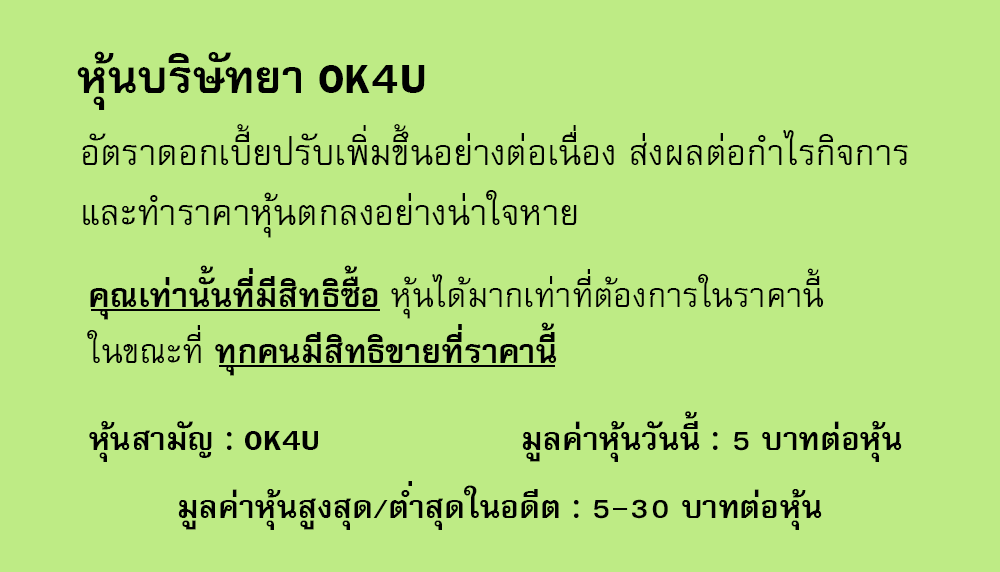
<style>
.page{position:relative;width:1000px;height:572px;background:#beeb85}
.page>*{position:absolute;margin:0}
.t1{font:64px "FreesiaUPCBold";color:#000000}
.t2{font:50px/60px "FreesiaUPC";color:#000000}
.t3{font:47px "FreesiaUPC";color:#000000}
.t4{font:47px "FreesiaUPCBold";color:#000000}
.t5{font:45px "FreesiaUPCBold";color:#000000}
</style>
<div class="page">
<p class="t1" style="left:77px;top:51px;width:348px;height:59px">หุ้นบริษัทยา OK4U</p>
<p class="t2" style="left:82px;top:124px;width:826px;height:114px">อัตราดอกเบี้ยปรับเพิ่มขึ้นอย่างต่อเนื่อง ส่งผลต่อกำไรกิจการ<br>และทำราคาหุ้นตกลงอย่างน่าใจหาย</p>
<p class="t3" style="left:87px;top:265px;width:737px;height:111px"><span class="t4">คุณเท่านั้นที่มีสิทธิซื้อ </span>หุ้นได้มากเท่าที่ต้องการในราคานี้<br>ในขณะที่<span class="t4"> ทุกคนมีสิทธิขายที่ราคานี้</span></p>
<p class="t5" style="left:522px;top:411px;width:380px;height:51px">มูลค่าหุ้นวันนี้ : 5 บาทต่อหุ้น</p>
<p class="t5" style="left:89px;top:421px;width:229px;height:41px">หุ้นสามัญ : OK4U</p>
<p class="t5" style="left:178px;top:481px;width:644px;height:49px">มูลค่าหุ้นสูงสุด/ต่ำสุดในอดีต : 5-30 บาทต่อหุ้น</p>
</div>
